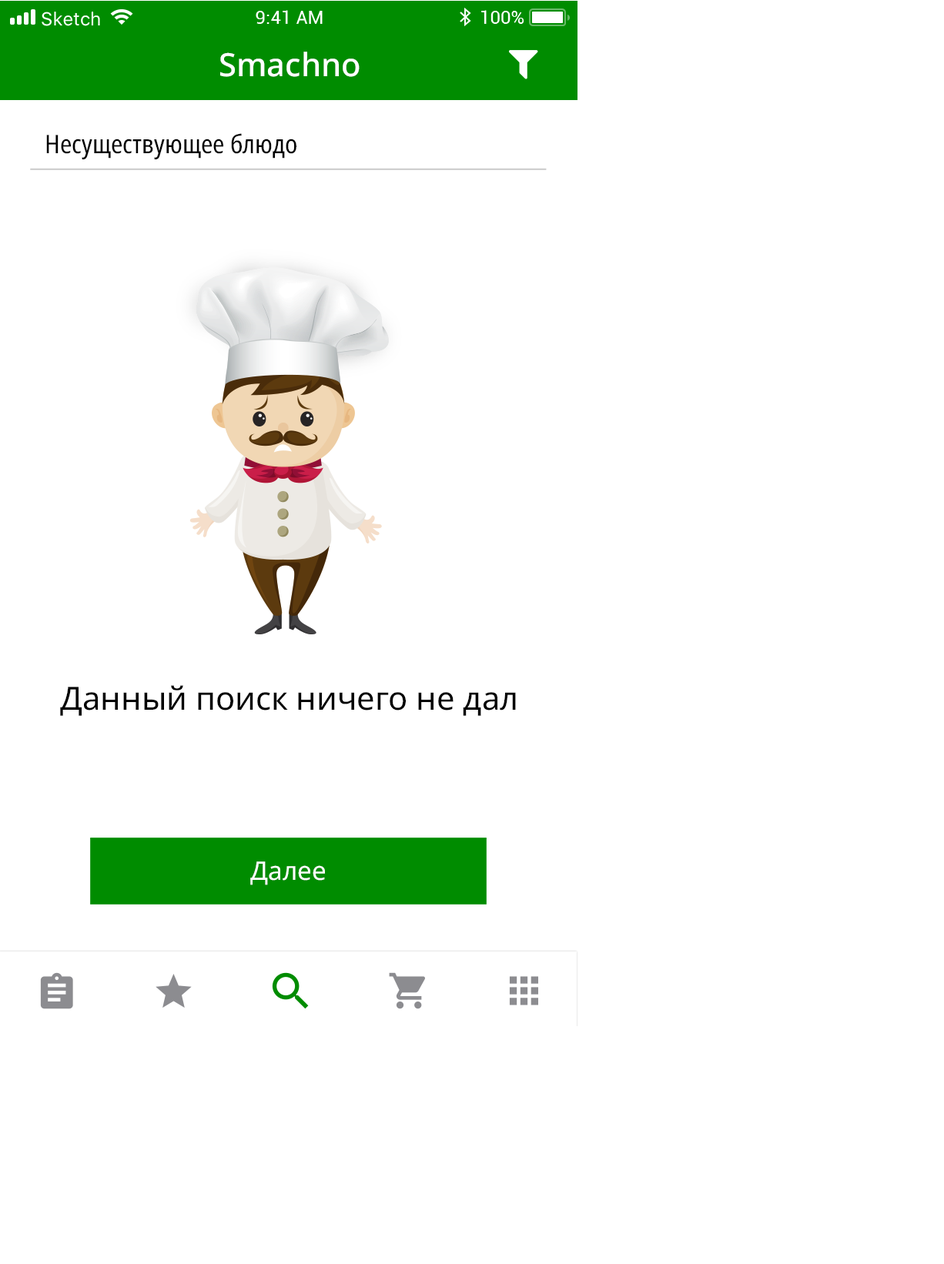
<style>
.page{position:relative;width:944px;height:1264px;background:#ffffff}
.page>*{position:absolute;margin:0}
.t1{font:32.1px "NotoSans-Medium";color:#ffffff}
.t2{font:25.6px "NotoSans-Condensed";color:#000000}
.t3{font:32.1px "NotoSans-Regular";color:#000000}
.t4{font:25.6px "NotoSans-Regular";color:#ffffff}
</style>
<div class="page">
<p class="t1" style="left:220px;top:52px;width:139px;height:25px">Smachno</p>
<p class="t2" style="left:46px;top:133px;width:250px;height:26px">Несуществующее блюдо</p>
<p class="t3" style="left:60px;top:685px;width:456px;height:31px">Данный поиск ничего не дал</p>
<p class="t4" style="left:250px;top:861px;width:75px;height:24px">Далее</p>
</div>
